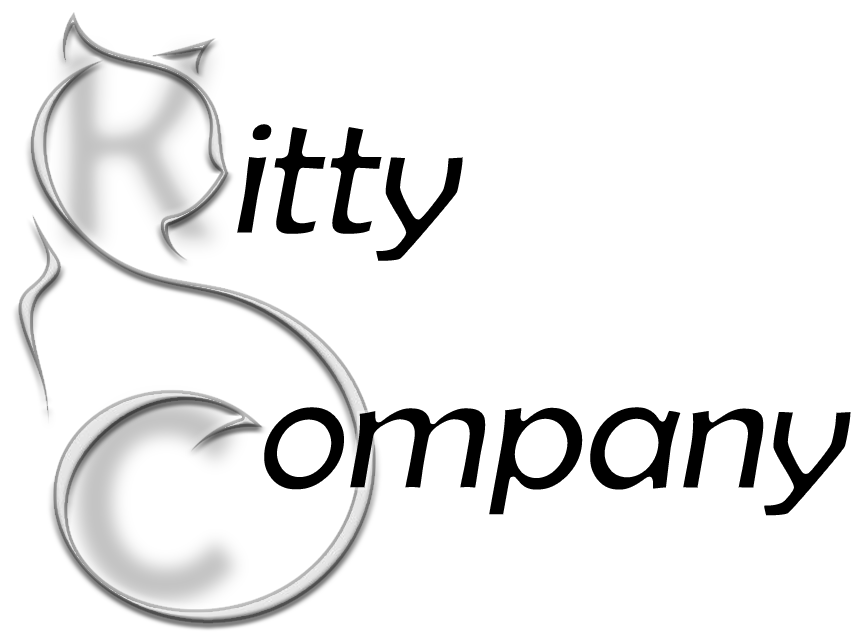
<style>
.page{position:relative;width:860px;height:634px;background:#ffffff}
.page>*{position:absolute;margin:0}
.t1{font:177.1px "BerlinSansFB-Reg";letter-spacing:-0.025em;color:#000000;font-style:italic}
</style>
<div class="page">
<p class="t1" style="left:234px;top:121px;width:232px;height:143px">itty</p>
<p class="t1" style="left:261px;top:404px;width:593px;height:115px">ompany</p>
</div>
